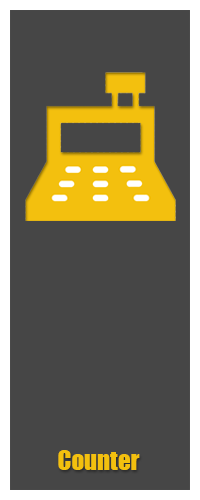
<style>
.page{position:relative;width:200px;height:500px;background:#464646}
.page>*{position:absolute;margin:0}
.t1{font:25px "Impact";color:#f3c00e}
</style>
<div class="page">
<p class="t1" style="left:58px;top:450px;width:82px;height:20px">Counter</p>
</div>
